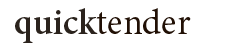
<style>
.page{position:relative;width:250px;height:50px;background:#ffffff}
.page>*{position:absolute;margin:0}
.t1{font:36px "MinionPro-Regular";color:#211005}
.t2{font:36px "MinionPro-Semibold";color:#2b231d}
</style>
<div class="page">
<p class="t1" style="left:15px;top:8px;width:176px;height:35px"><span class="t2">quick</span>tender</p>
</div>
